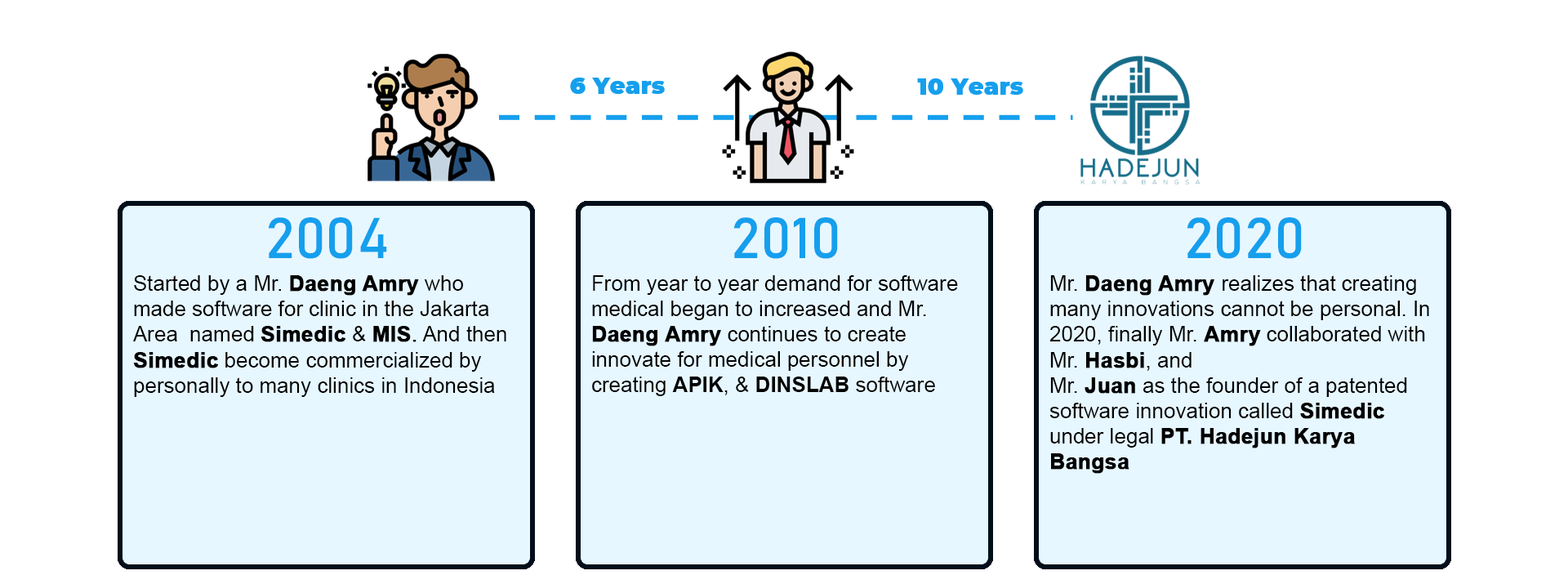
<style>
.page{position:relative;width:1568px;height:584px;background:#ffffff}
.page>*{position:absolute;margin:0}
.t1{font:56.7px "Bahnschrift";color:#159fed}
.t2{font:21.2px "ArialMT";color:#000000}
.t3{font:21.2px "Arial-BoldMT";color:#000000;font-weight:bold}
.t4{font:21.2px "ArialMT";color:#000000;font-weight:bold}
.t5{font:21.2px "Arial-BoldMT";color:#000000}
</style>
<div class="page">
<p class="t1" style="left:268px;top:217px;width:119px;height:42px">2004</p>
<p class="t1" style="left:733px;top:217px;width:105px;height:42px">2010</p>
<p class="t1" style="left:1187px;top:217px;width:115px;height:42px">2020</p>
<p class="t2" style="left:133px;top:275px;width:373px;height:122px">Started by a Mr. <span class="t3">Daeng Amry</span> who made software for clinic in the Jakarta Area  named <span class="t3">Simedic</span> &amp; <span class="t3">MIS</span><span class="t4">.</span> And then <span class="t3">Simedic</span> become commercialized by personally to many clinics in Indonesia</p>
<p class="t2" style="left:592px;top:275px;width:366px;height:121px">From year to year demand for software medical began to increased and Mr. <span class="t3">Daeng Amry</span> continues to create innovate for medical personnel by creating <span class="t5">APIK</span>, &amp; <span class="t5">DINSLAB</span> software</p>
<p class="t2" style="left:1049px;top:275px;width:380px;height:199px">Mr. <span class="t3">Daeng Amry </span>realizes that creating many innovations cannot be personal. In 2020, finally Mr. <span class="t3">Amry</span> collaborated with Mr. <span class="t3">Hasbi</span>, and<br>Mr. <span class="t3">Juan</span> as the founder of a patented software innovation called <span class="t3">Simedic</span> under legal <span class="t3">PT. Hadejun Karya Bangsa</span></p>
</div>
